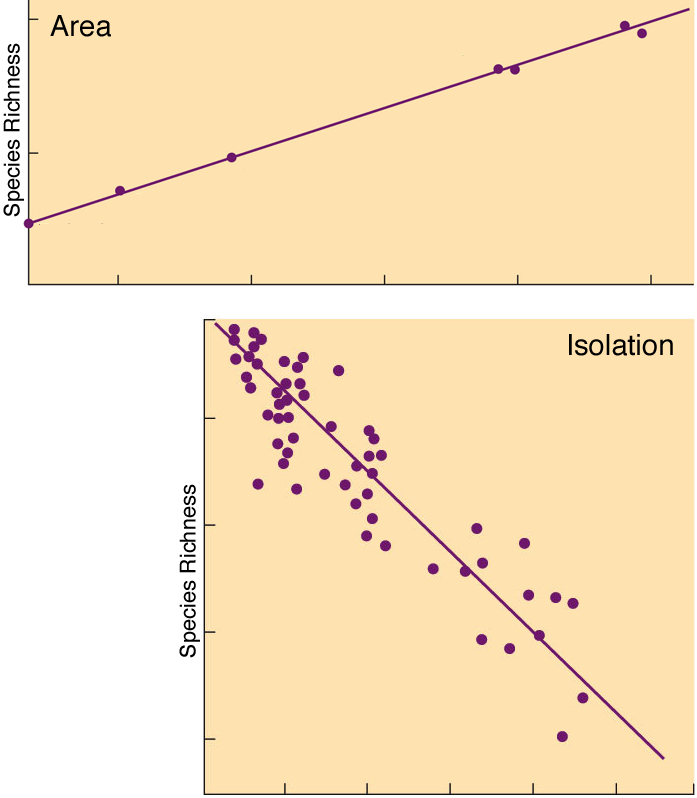
<style>
.page{position:relative;width:697px;height:798px;background:#fee2b0}
.page>*{position:absolute;margin:0}
.t1{font:50px "Helvetica";color:#000000}
.t2{font:37.5px "Helvetica";color:#000000}
</style>
<div class="page">
<p class="t1" style="left:50px;top:15px;width:61px;height:22px">Area</p>
<p class="t2" style="left:3px;top:43px;width:21px;height:174px;rotate:-90deg">Species Richness</p>
<p class="t1" style="left:569px;top:334px;width:104px;height:22px">Isolation</p>
<p class="t2" style="left:179px;top:484px;width:21px;height:174px;rotate:-90deg">Species Richness</p>
</div>
